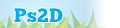
<style>
.page{position:relative;width:120px;height:28px}
.page>*{position:absolute;margin:0}
.t1{font:19.5px "ChunkFive-Roman";letter-spacing:0.025em;color:#00aeef}
</style>
<div class="page">
<p class="t1" style="left:14px;top:8px;width:49px;height:15px">Ps2D</p>
</div>
